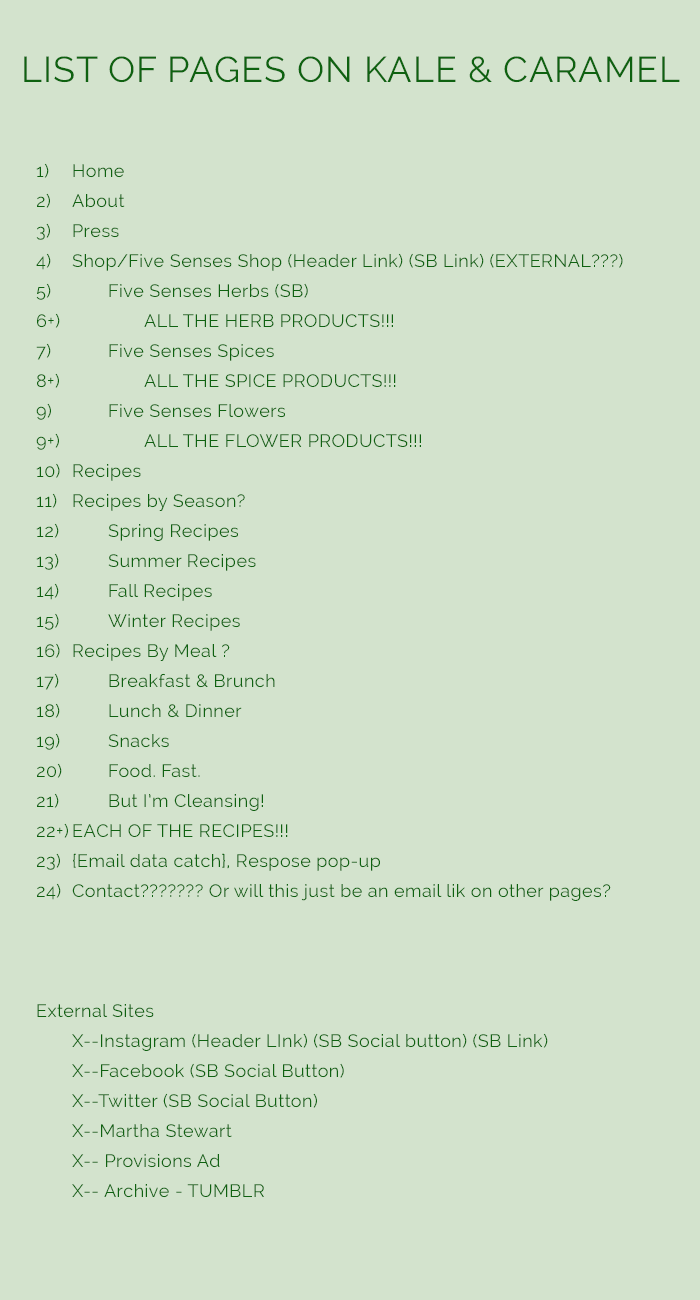
<style>
.page{position:relative;width:700px;height:1300px;background:#d3e3cd}
.page>*{position:absolute;margin:0}
.t1{font:36px "Raleway";letter-spacing:0.025em;color:#0e6210}
.t2{font:18px/30px "Raleway";letter-spacing:0.025em;color:#0e6210}
</style>
<div class="page">
<p class="t1" style="left:24px;top:56px;width:656px;height:27px">LIST OF PAGES ON KALE &amp; CARAMEL</p>
<p class="t2" style="left:36px;top:163px;width:587px;height:1035px">1) Home<br>2) About <br>3) Press<br>4) Shop/Five Senses Shop (Header Link) (SB Link) (EXTERNAL???)<br>5)  Five Senses Herbs (SB)<br>6+)   ALL THE HERB PRODUCTS!!!<br>7)  Five Senses Spices<br>8+)   ALL THE SPICE PRODUCTS!!!<br>9)  Five Senses Flowers<br>9+)   ALL THE FLOWER PRODUCTS!!!<br>10) Recipes <br>11) Recipes by Season?<br>12)  Spring Recipes<br>13)  Summer Recipes<br>14)  Fall Recipes<br>15)  Winter Recipes<br>16) Recipes By Meal ?<br>17)  Breakfast &amp; Brunch<br>18)  Lunch &amp; Dinner<br>19)  Snacks<br>20)  Food. Fast. <br>21)  But I’m Cleansing!<br>22+) EACH OF THE RECIPES!!!<br>23) {Email data catch}, Respose pop-up<br>24) Contact??????? Or will this just be an email lik on other pages?<br><br><br><br>External Sites <br> X--Instagram (Header LInk) (SB Social button) (SB Link)<br> X--Facebook (SB Social Button)<br> X--Twitter (SB Social Button)<br> X--Martha Stewart<br> X-- Provisions Ad<br> X-- Archive - TUMBLR</p>
</div>
